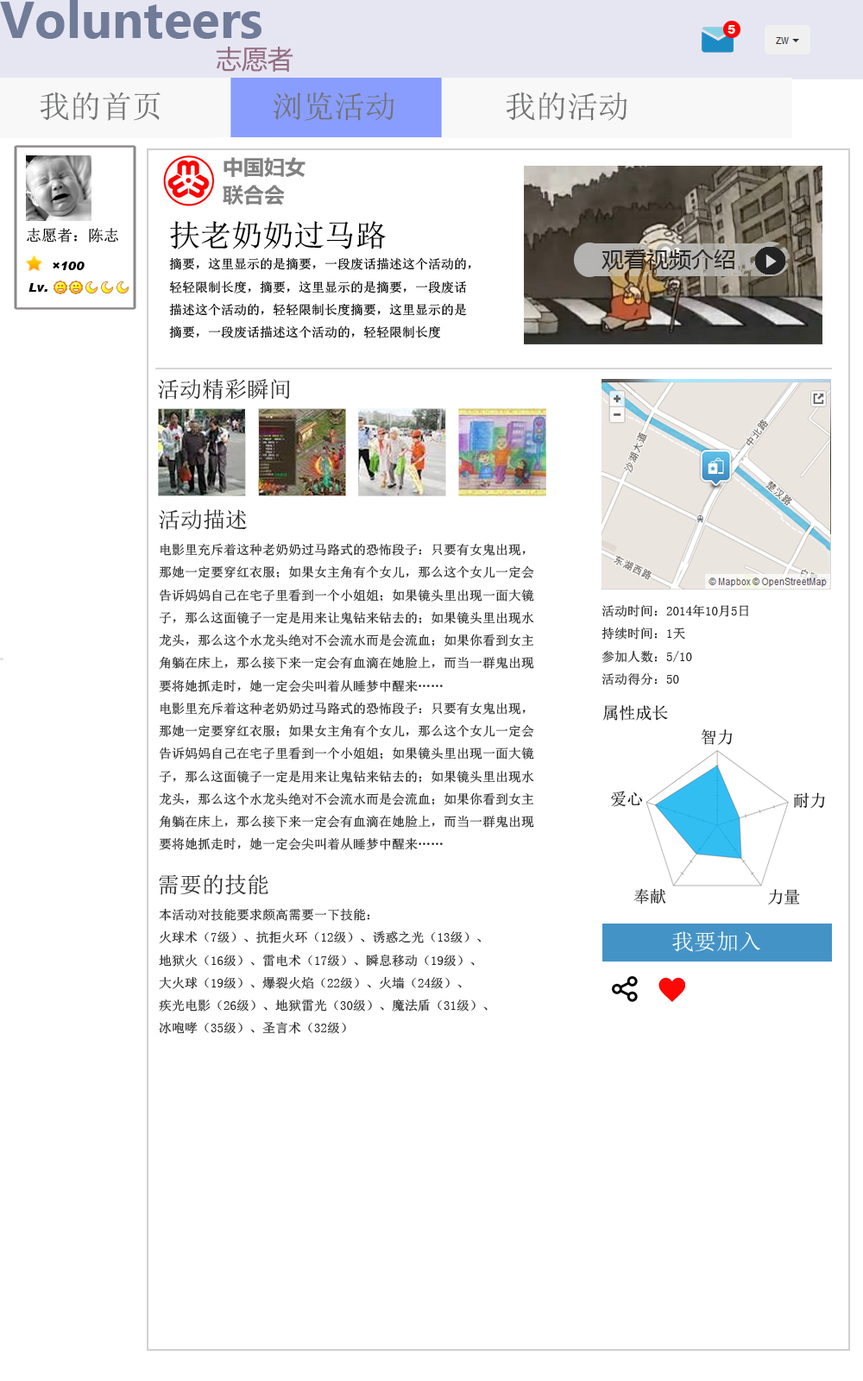
<style>
.page{position:relative;width:863px;height:1381px;background:#ffffff}
.page>*{position:absolute;margin:0}
.t1{font:12.1px "Arial-Black";color:#ffffff}
.t2{font:31.1px "SimSun";color:#717273}
.t3{font:12.7px "SimSun";color:#010101}
.t4{font:30.5px "SimSun";color:#010101}
.t5{font:15.5px "SimSun";color:#000000}
.t6{font:22px "MicrosoftYaHei";color:#272727}
.t7{font:12.1px "Arial-BlackItalic";color:#000000}
.t8{font:22px "NSimSun";color:#272727}
.t9{font:12.7px "NSimSun";color:#272727}
.t10{font:22px "NSimSun";color:#ffffff}
</style>
<div class="page">
<p class="t1" style="left:728px;top:25px;width:8px;height:9px">5</p>
<p class="t2" style="left:40px;top:92px;width:588px;height:29px">我的首页       浏览活动       我的活动</p>
<p class="t3" style="left:169px;top:221px;width:302px;height:117px"><span class="t4">扶老奶奶过马路<br></span>摘要，这里显示的是摘要，一段废话描述这个活动的，<br>轻轻限制长度，摘要，这里显示的是摘要，一段废话<br>描述这个活动的，轻轻限制长度摘要，这里显示的是<br>摘要，一段废话描述这个活动的，轻轻限制长度</p>
<p class="t5" style="left:27px;top:228px;width:91px;height:15px">志愿者：陈志</p>
<p class="t6" style="left:602px;top:249px;width:134px;height:21px">观看视频介绍</p>
<p class="t7" style="left:53px;top:262px;width:32px;height:8px">×100</p>
<p class="t7" style="left:28px;top:283px;width:19px;height:9px">Lv.</p>
<p class="t8" style="left:158px;top:379px;width:132px;height:21px">活动精彩瞬间</p>
<p class="t8" style="left:159px;top:509px;width:88px;height:21px">活动描述</p>
<p class="t9" style="left:159px;top:543px;width:375px;height:307px">电影里充斥着这种老奶奶过马路式的恐怖段子：只要有女鬼出现，<br>那她一定要穿红衣服；如果女主角有个女儿，那么这个女儿一定会<br>告诉妈妈自己在宅子里看到一个小姐姐；如果镜头里出现一面大镜<br>子，那么这面镜子一定是用来让鬼钻来钻去的；如果镜头里出现水<br>龙头，那么这个水龙头绝对不会流水而是会流血；如果你看到女主<br>角躺在床上，那么接下来一定会有血滴在她脸上，而当一群鬼出现<br>要将她抓走时，她一定会尖叫着从睡梦中醒来……<br>电影里充斥着这种老奶奶过马路式的恐怖段子：只要有女鬼出现，<br>那她一定要穿红衣服；如果女主角有个女儿，那么这个女儿一定会<br>告诉妈妈自己在宅子里看到一个小姐姐；如果镜头里出现一面大镜<br>子，那么这面镜子一定是用来让鬼钻来钻去的；如果镜头里出现水<br>龙头，那么这个水龙头绝对不会流水而是会流血；如果你看到女主<br>角躺在床上，那么接下来一定会有血滴在她脸上，而当一群鬼出现<br>要将她抓走时，她一定会尖叫着从睡梦中醒来……</p>
<p class="t9" style="left:602px;top:604px;width:146px;height:81px">活动时间：2014年10月5日<br>持续时间：1天<br>参加人数：5/10<br>活动得分：50</p>
<p class="t8" style="left:159px;top:875px;width:109px;height:20px">需要的技能</p>
<p class="t9" style="left:159px;top:908px;width:329px;height:126px">本活动对技能要求颇高需要一下技能：<br>火球术（7级）、抗拒火环（12级）、诱惑之光（13级）、<br>地狱火（16级）、雷电术（17级）、瞬息移动（19级）、<br>大火球（19级）、爆裂火焰（22级）、火墙（24级）、<br>疾光电影（26级）、地狱雷光（30级）、魔法盾（31级）、<br>冰咆哮（35级）、圣言术（32级）</p>
<p class="t10" style="left:673px;top:931px;width:88px;height:21px">我要加入</p>
</div>
